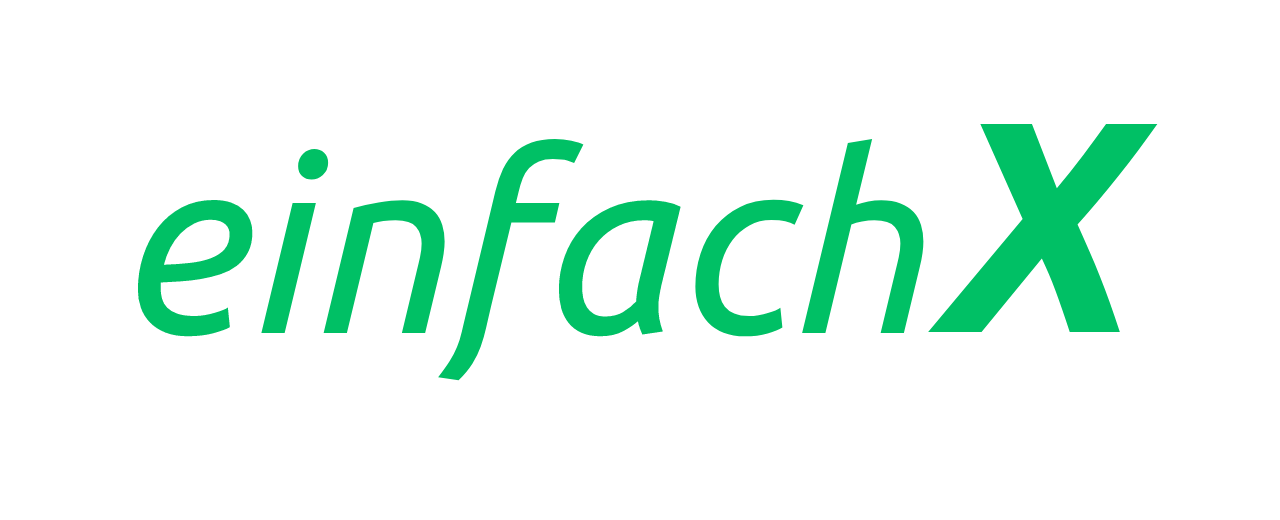
<style>
.page{position:relative;width:1280px;height:520px;background:#ffffff}
.page>*{position:absolute;margin:0}
.t1{font:300px "Ubuntu-BoldItalic";color:#00c065}
.t2{font:250px "Ubuntu-Italic";color:#00c065}
</style>
<div class="page">
<p class="t1" style="left:928px;top:124px;width:230px;height:208px">X</p>
<p class="t2" style="left:137px;top:139px;width:787px;height:242px">einfach</p>
</div>
